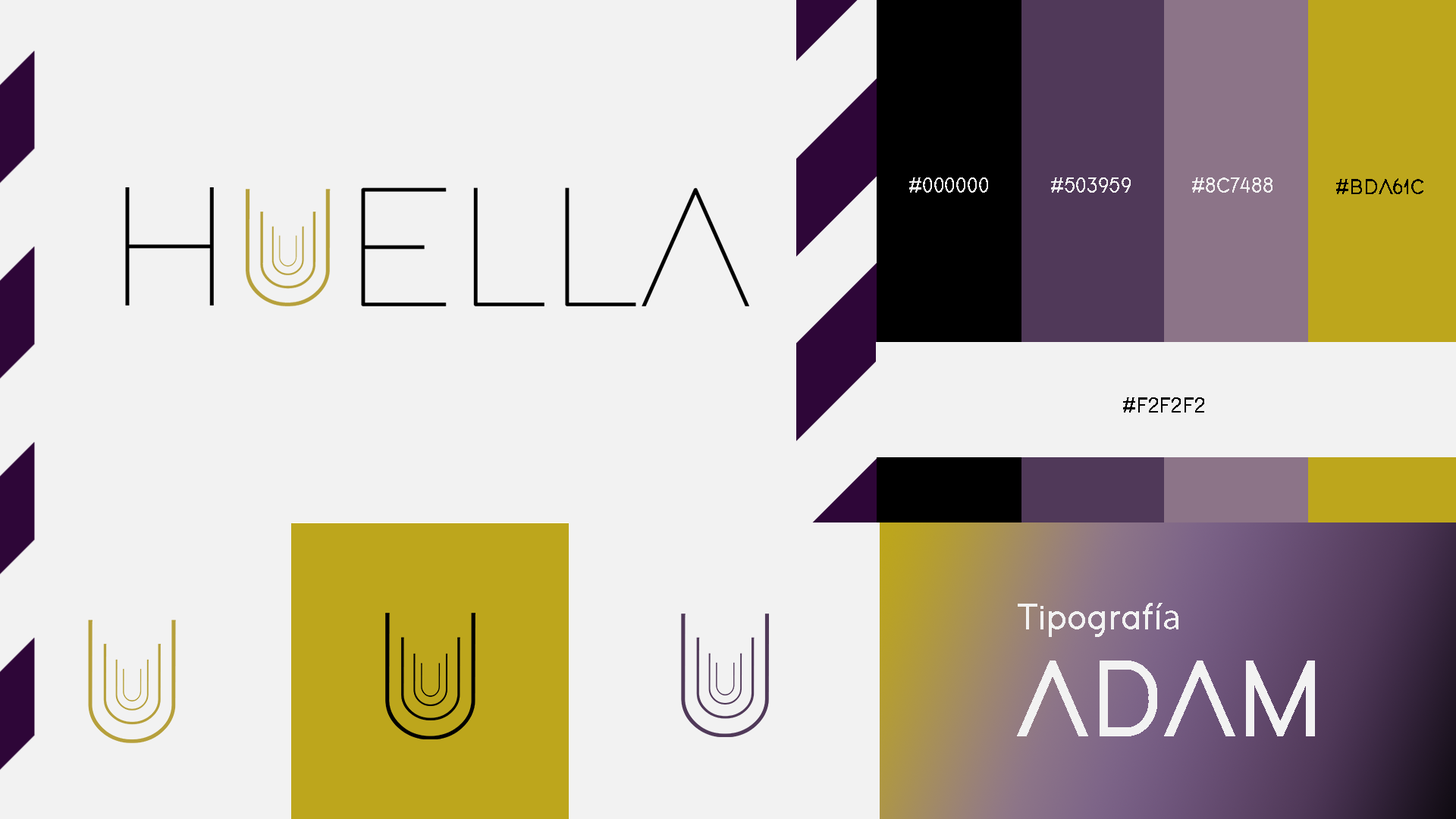
<style>
.page{position:relative;width:1456px;height:819px;background:#f2f2f2}
.page>*{position:absolute;margin:0}
.t1{font:22.3px "Adam-Bold";color:#f2f2f2}
.t2{font:22.3px "Adam-Bold";color:#000000}
.t3{font:37.9px "Adam-Bold";color:#f2f2f2}
.t4{font:37.9px "MyriadPro-Regular";color:#f2f2f2}
.t5{font:111.1px "Adam-Bold";color:#f2f2f2}
</style>
<div class="page">
<p class="t1" style="left:909px;top:177px;width:79px;height:16px">#000000</p>
<p class="t1" style="left:1051px;top:177px;width:80px;height:16px">#503959</p>
<p class="t1" style="left:1192px;top:177px;width:80px;height:16px">#8C7488</p>
<p class="t2" style="left:1336px;top:178px;width:87px;height:16px">#BDA61C</p>
<p class="t2" style="left:1123px;top:397px;width:81px;height:16px">#F2F2F2</p>
<p class="t3" style="left:1018px;top:603px;width:160px;height:34px">Tipograf<span class="t4">ía</span></p>
<p class="t5" style="left:1017px;top:660px;width:298px;height:76px">ADAM</p>
</div>
